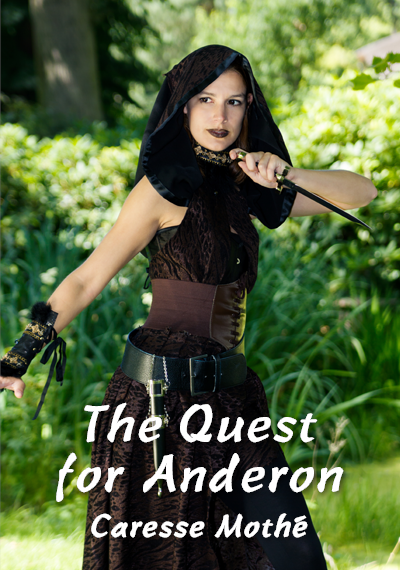
<style>
.page{position:relative;width:400px;height:570px}
.page>*{position:absolute;margin:0}
.t1{font:60px/50px "STLibian-SC-Regular";color:#ffffff}
.t2{font:36px "STLibian-SC-Regular";color:#ffffff}
</style>
<div class="page">
<p class="t1" style="left:57px;top:403px;width:286px;height:98px;text-align:center">The Quest<br>for Anderon</p>
<p class="t2" style="left:92px;top:514px;width:215px;height:23px">Caresse Mothé</p>
</div>
